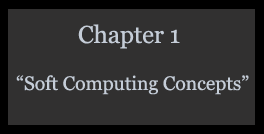
<style>
.page{position:relative;width:264px;height:134px;background:#313030}
.page>*{position:absolute;margin:0}
.t1{font:24.5px "Georgia";letter-spacing:-0.005em;color:#c5cdd8}
.t2{font:19.5px "Georgia";letter-spacing:-0.005em;color:#c5cdd8}
</style>
<div class="page">
<p class="t1" style="left:78px;top:24px;width:102px;height:25px">Chapter 1</p>
<p class="t2" style="left:16px;top:75px;width:233px;height:20px">“Soft Computing Concepts”</p>
</div>
